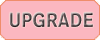
<style>
.page{position:relative;width:100px;height:40px;background:#fbb7c0}
.page>*{position:absolute;margin:0}
.t1{font:18px "Yj-TEUNTEUN--Bold"}
</style>
<div class="page">
<p class="t1" style="left:9px;top:12px;width:84px;height:16px">UPGRADE</p>
</div>
